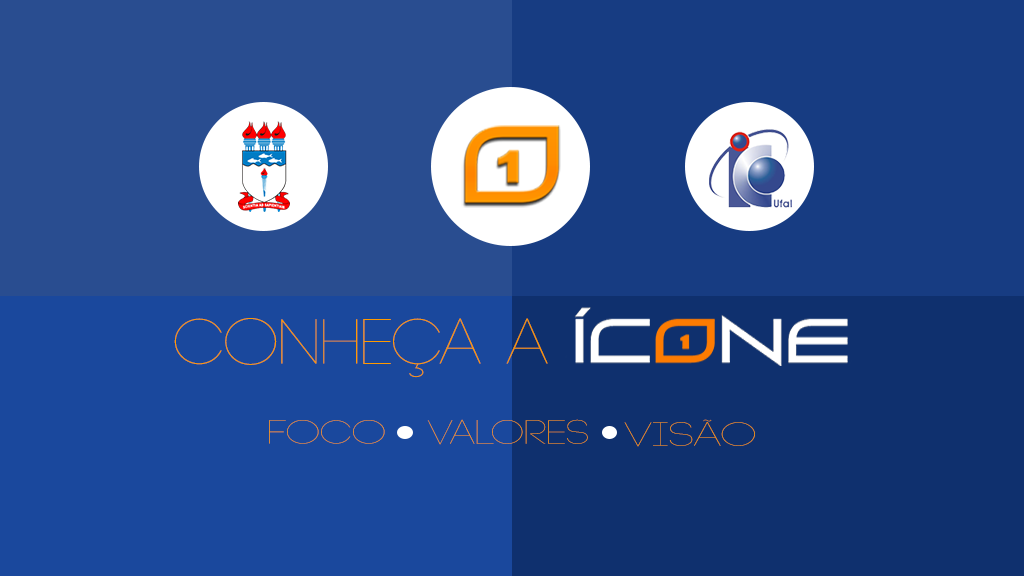
<style>
.page{position:relative;width:1024px;height:576px;background:#1a489d}
.page>*{position:absolute;margin:0}
.t1{font:64.3px "Code-Light";color:#ff9a00;scale:1.11 1}
.t2{font:33.5px "Code-Light";scale:1.33 1}
.t3{font:33.6px "Code-Light";scale:1.27 1}
.t4{font:33.5px "Code-Light";scale:1.39 1}
</style>
<div class="page">
<p class="t1" style="left:174px;top:318px;width:374px;height:60px">Conheça a</p>
<p class="t2" style="left:269px;top:420px;width:116px;height:24px">Foco</p>
<p class="t3" style="left:427px;top:419px;width:161px;height:26px">Valores</p>
<p class="t4" style="left:624px;top:419px;width:131px;height:28px">visão</p>
</div>
